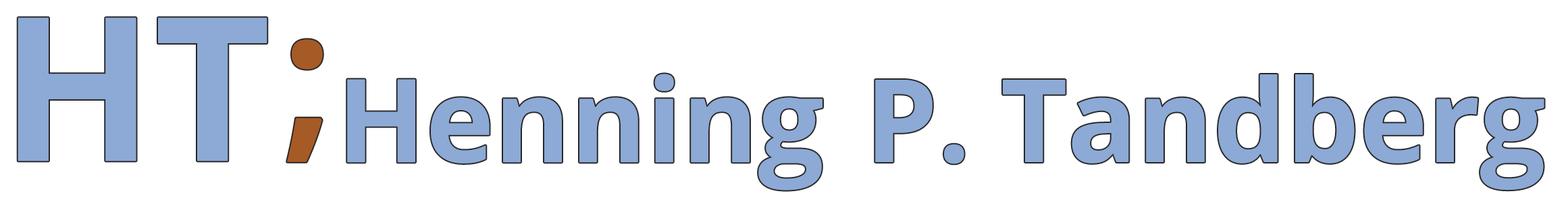
<style>
.page{position:relative;width:1568px;height:204px;background:#ffffff}
.page>*{position:absolute;margin:0}
.t1{font:200.3px "OpenSans-Bold";color:#8caad5}
.t2{font:178.5px "OpenSans-Bold";color:#a65a25}
.t3{font:115.9px "OpenSans-Bold";color:#8caad5}
.t4{font:115.4px "OpenSans-Bold";color:#8caad5}
</style>
<div class="page">
<p class="t1" style="left:18px;top:18px;width:249px;height:143px">HT</p>
<p class="t2" style="left:287px;top:39px;width:36px;height:123px">;</p>
<p class="t3" style="left:347px;top:74px;width:475px;height:116px">Henning</p>
<p class="t4" style="left:875px;top:74px;width:669px;height:116px">P. Tandberg</p>
</div>
